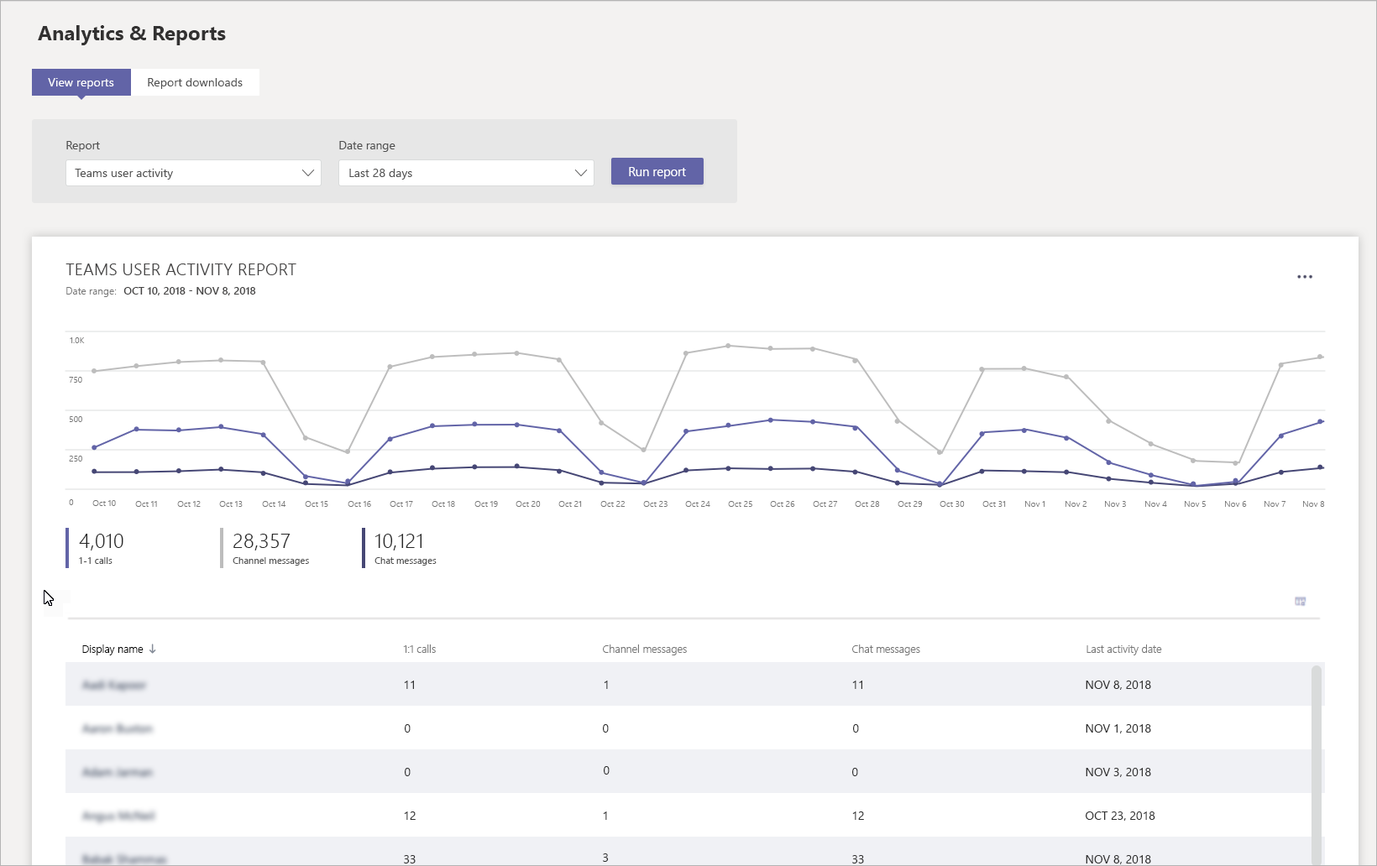
<style>
.page{position:relative;width:1377px;height:866px;background:#ffffff}
.page>*{position:absolute;margin:0}
.t1{font:20.1px "SegoeUI-Bold";color:#323131}
.t2{font:11.9px "SegoeUI";color:#ffffff}
.t3{font:11.9px "SegoeUI";color:#505050}
.t4{font:11.6px "SegoeUI";color:#505050}
.t5{font:12.2px "SegoeUI";color:#ffffff}
.t6{font:17.1px "SegoeUI-Semilight";color:#454444}
.t7{font:10.2px "SegoeUI-Semilight";color:#757575}
.t8{font:10.8px "SegoeUI-Semibold";color:#454444}
.t9{font:8.7px "SegoeUI-Semilight";color:#757575}
.t10{font:20.4px "SegoeUI-Semilight";color:#272727}
.t11{font:9.4px "SegoeUI";color:#505050}
.t12{font:10.6px "SegoeUI-Semilight";color:#000000}
.t13{font:10.6px "SegoeUI-Semilight";color:#757575}
.t14{font:11.9px "SegoeUI";color:#303030}
</style>
<div class="page">
<p class="t1" style="left:38px;top:25px;width:188px;height:20px">Analytics &amp; Reports</p>
<p class="t2" style="left:48px;top:78px;width:66px;height:11px">View reports</p>
<p class="t3" style="left:148px;top:78px;width:95px;height:11px">Report downloads</p>
<p class="t4" style="left:66px;top:141px;width:34px;height:11px">Report</p>
<p class="t4" style="left:339px;top:141px;width:56px;height:11px">Date range</p>
<p class="t3" style="left:75px;top:169px;width:98px;height:11px">Teams user activity</p>
<p class="t3" style="left:349px;top:169px;width:63px;height:11px">Last 28 days</p>
<p class="t5" style="left:629px;top:167px;width:57px;height:12px">Run report</p>
<p class="t6" style="left:65px;top:264px;width:231px;height:11px">TEAMS USER ACTIVITY REPORT</p>
<p class="t7" style="left:66px;top:287px;width:51px;height:10px">Date range:</p>
<p class="t8" style="left:123px;top:287px;width:133px;height:8px">OCT 10, 2018 - NOV 8, 2018</p>
<p class="t9" style="left:70px;top:337px;width:15px;height:6px">1.0K</p>
<p class="t9" style="left:69px;top:377px;width:13px;height:6px">750</p>
<p class="t9" style="left:69px;top:416px;width:13px;height:6px">500</p>
<p class="t9" style="left:69px;top:456px;width:13px;height:6px">250</p>
<p class="t9" style="left:69px;top:499px;width:5px;height:6px">0</p>
<p class="t9" style="left:92px;top:500px;width:24px;height:6px">Oct 10</p>
<p class="t9" style="left:135px;top:501px;width:22px;height:6px">Oct 11</p>
<p class="t9" style="left:177px;top:501px;width:24px;height:6px">Oct 12</p>
<p class="t9" style="left:219px;top:501px;width:24px;height:6px">Oct 13</p>
<p class="t9" style="left:262px;top:501px;width:24px;height:6px">Oct 14</p>
<p class="t9" style="left:305px;top:501px;width:23px;height:6px">Oct 15</p>
<p class="t9" style="left:348px;top:501px;width:23px;height:6px">Oct 16</p>
<p class="t9" style="left:389px;top:501px;width:24px;height:6px">Oct 17</p>
<p class="t9" style="left:431px;top:501px;width:24px;height:6px">Oct 18</p>
<p class="t9" style="left:474px;top:501px;width:24px;height:6px">Oct 19</p>
<p class="t9" style="left:515px;top:501px;width:26px;height:6px">Oct 20</p>
<p class="t9" style="left:558px;top:501px;width:24px;height:6px">Oct 21</p>
<p class="t9" style="left:600px;top:501px;width:24px;height:6px">Oct 22</p>
<p class="t9" style="left:643px;top:501px;width:24px;height:6px">Oct 23</p>
<p class="t9" style="left:685px;top:501px;width:25px;height:6px">Oct 24</p>
<p class="t9" style="left:728px;top:501px;width:24px;height:6px">Oct 25</p>
<p class="t9" style="left:770px;top:501px;width:25px;height:6px">Oct 26</p>
<p class="t9" style="left:813px;top:501px;width:25px;height:6px">Oct 27</p>
<p class="t9" style="left:854px;top:501px;width:26px;height:6px">Oct 28</p>
<p class="t9" style="left:897px;top:501px;width:25px;height:6px">Oct 29</p>
<p class="t9" style="left:939px;top:501px;width:25px;height:6px">Oct 30</p>
<p class="t9" style="left:982px;top:501px;width:24px;height:6px">Oct 31</p>
<p class="t9" style="left:1025px;top:501px;width:20px;height:6px">Nov 1</p>
<p class="t9" style="left:1065px;top:501px;width:21px;height:6px">Nov 2</p>
<p class="t9" style="left:1105px;top:501px;width:21px;height:6px">Nov 3</p>
<p class="t9" style="left:1145px;top:501px;width:22px;height:6px">Nov 4</p>
<p class="t9" style="left:1184px;top:501px;width:21px;height:6px">Nov 5</p>
<p class="t9" style="left:1225px;top:501px;width:21px;height:6px">Nov 6</p>
<p class="t9" style="left:1264px;top:501px;width:22px;height:6px">Nov 7</p>
<p class="t9" style="left:1303px;top:501px;width:22px;height:6px">Nov 8</p>
<p class="t10" style="left:79px;top:534px;width:44px;height:17px">4,010</p>
<p class="t10" style="left:233px;top:534px;width:57px;height:17px">28,357</p>
<p class="t10" style="left:374px;top:534px;width:48px;height:17px">10,121</p>
<p class="t11" style="left:79px;top:557px;width:33px;height:7px">1-1 calls</p>
<p class="t11" style="left:233px;top:557px;width:76px;height:9px">Channel messages</p>
<p class="t11" style="left:374px;top:557px;width:62px;height:9px">Chat messages</p>
<p class="t12" style="left:82px;top:645px;width:62px;height:11px">Display name</p>
<p class="t13" style="left:403px;top:645px;width:33px;height:8px">1:1 calls</p>
<p class="t13" style="left:603px;top:645px;width:84px;height:11px">Channel messages</p>
<p class="t13" style="left:852px;top:645px;width:68px;height:11px">Chat messages</p>
<p class="t13" style="left:1086px;top:645px;width:76px;height:11px">Last activity date</p>
<p class="t14" style="left:404px;top:681px;width:10px;height:8px">11</p>
<p class="t14" style="left:604px;top:681px;width:4px;height:8px">1</p>
<p class="t14" style="left:852px;top:681px;width:10px;height:8px">11</p>
<p class="t14" style="left:1085px;top:681px;width:66px;height:9px">NOV 8, 2018</p>
<p class="t14" style="left:405px;top:724px;width:5px;height:9px">0</p>
<p class="t14" style="left:603px;top:724px;width:6px;height:9px">0</p>
<p class="t14" style="left:853px;top:724px;width:6px;height:9px">0</p>
<p class="t14" style="left:1085px;top:724px;width:66px;height:10px">NOV 1, 2018</p>
<p class="t14" style="left:405px;top:768px;width:5px;height:8px">0</p>
<p class="t14" style="left:604px;top:766px;width:5px;height:9px">0</p>
<p class="t14" style="left:852px;top:768px;width:6px;height:8px">0</p>
<p class="t14" style="left:1085px;top:768px;width:66px;height:9px">NOV 3, 2018</p>
<p class="t14" style="left:404px;top:812px;width:11px;height:8px">12</p>
<p class="t14" style="left:603px;top:812px;width:4px;height:8px">1</p>
<p class="t14" style="left:852px;top:812px;width:12px;height:8px">12</p>
<p class="t14" style="left:1085px;top:812px;width:70px;height:9px">OCT 23, 2018</p>
<p class="t14" style="left:404px;top:855px;width:11px;height:9px">33</p>
<p class="t14" style="left:603px;top:854px;width:6px;height:8px">3</p>
<p class="t14" style="left:852px;top:855px;width:12px;height:9px">33</p>
<p class="t14" style="left:1085px;top:855px;width:66px;height:10px">NOV 8, 2018</p>
</div>
